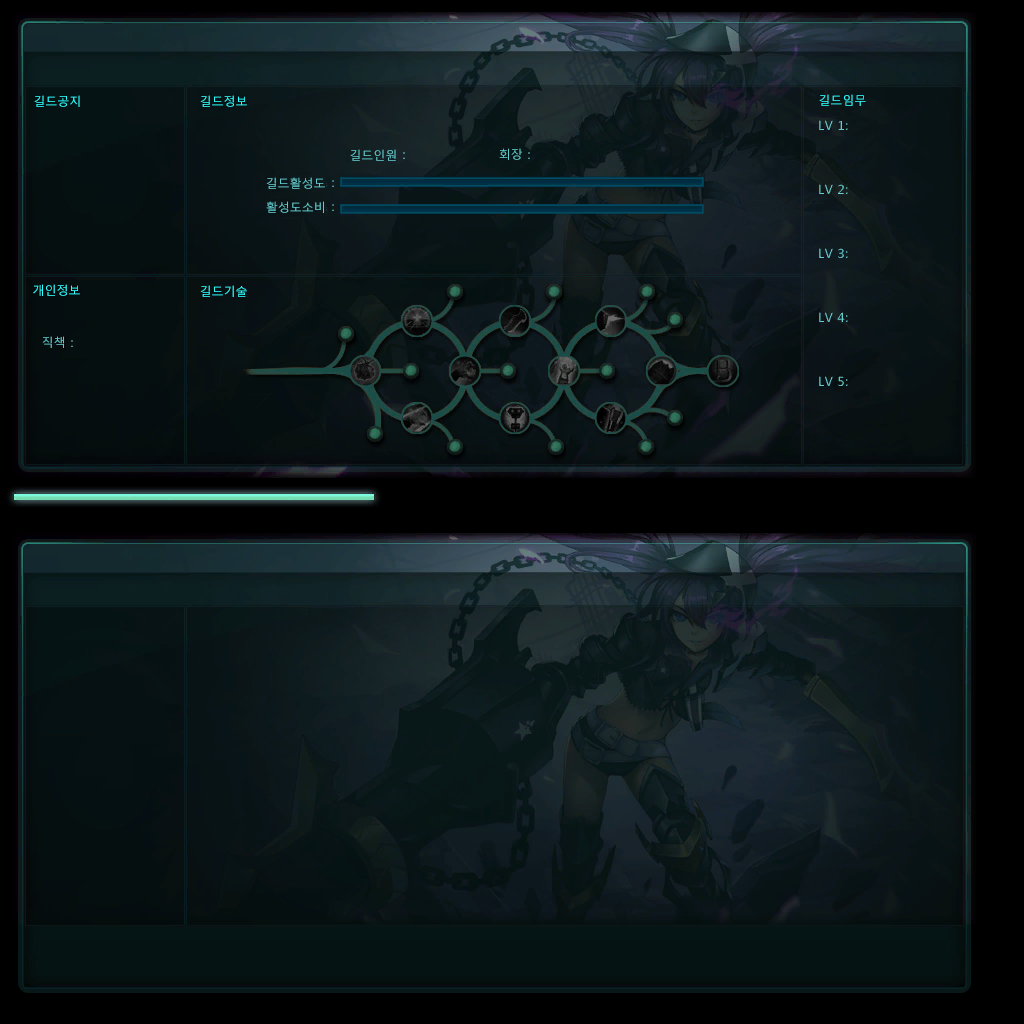
<style>
.page{position:relative;width:1024px;height:1024px}
.page>*{position:absolute;margin:0}
.t1{font:12px "MalgunGothicRegular";color:#31ffff}
.t2{font:12px "MalgunGothicRegular";color:#63cbce}
.t3{font:12px "MalgunGothicRegular";color:#63c7c6}
</style>
<div class="page">
<p class="t1" style="left:34px;top:95px;width:46px;height:12px">길드공지</p>
<p class="t1" style="left:200px;top:95px;width:47px;height:12px">길드정보</p>
<p class="t1" style="left:819px;top:94px;width:47px;height:12px">길드임무</p>
<p class="t2" style="left:350px;top:149px;width:46px;height:12px">길드인원</p>
<p class="t2" style="left:499px;top:148px;width:23px;height:12px">회장</p>
<p class="t2" style="left:266px;top:177px;width:59px;height:12px">길드활성도</p>
<p class="t2" style="left:266px;top:201px;width:58px;height:12px">활성도소비</p>
<p class="t1" style="left:33px;top:284px;width:47px;height:12px">개인정보</p>
<p class="t1" style="left:200px;top:285px;width:47px;height:12px">길드기술</p>
<p class="t3" style="left:42px;top:336px;width:22px;height:12px">직책</p>
</div>
